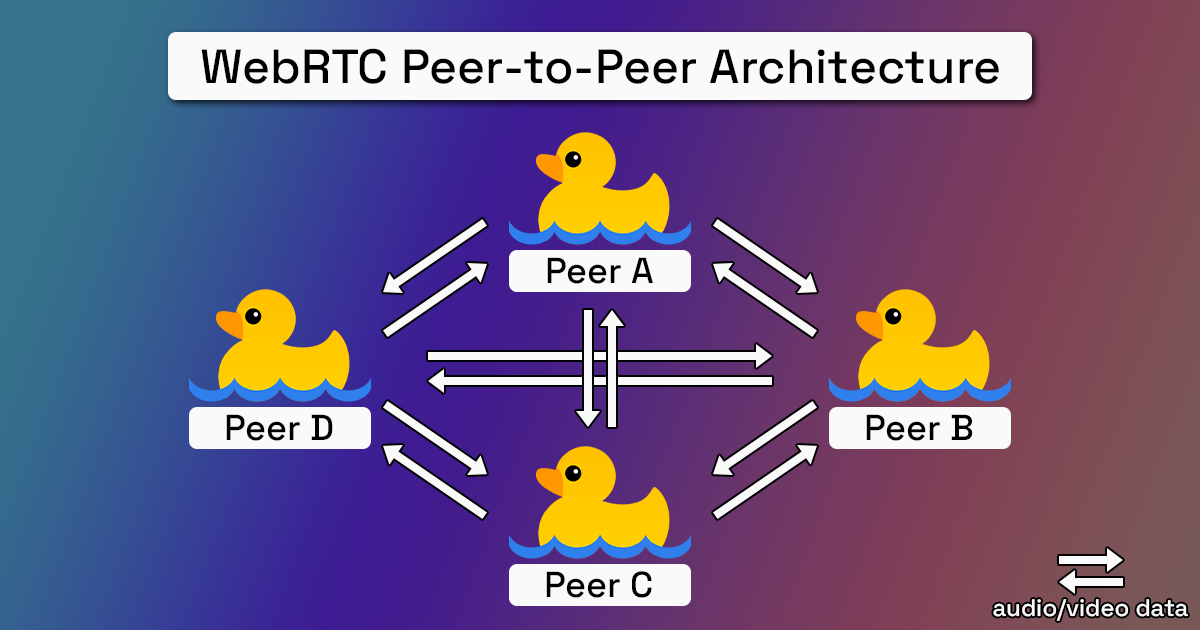
<style>
.page{position:relative;width:1200px;height:630px}
.page>*{position:absolute;margin:0}
.t1{font:48px "SpaceGrotesk-Medium";color:#000000}
.t2{font:36px "SpaceGrotesk-Medium";color:#000000}
.t3{font:24px "SpaceGrotesk-Medium";color:#fafafa}
</style>
<div class="page">
<p class="t1" style="left:201px;top:48px;width:798px;height:36px">WebRTC Peer-to-Peer Architecture</p>
<p class="t2" style="left:547px;top:257px;width:106px;height:27px">Peer A</p>
<p class="t2" style="left:226px;top:414px;width:107px;height:27px">Peer D</p>
<p class="t2" style="left:866px;top:414px;width:107px;height:27px">Peer B</p>
<p class="t2" style="left:546px;top:571px;width:106px;height:27px">Peer C</p>
<p class="t3" style="left:993px;top:599px;width:195px;height:22px">audio/video data</p>
</div>
